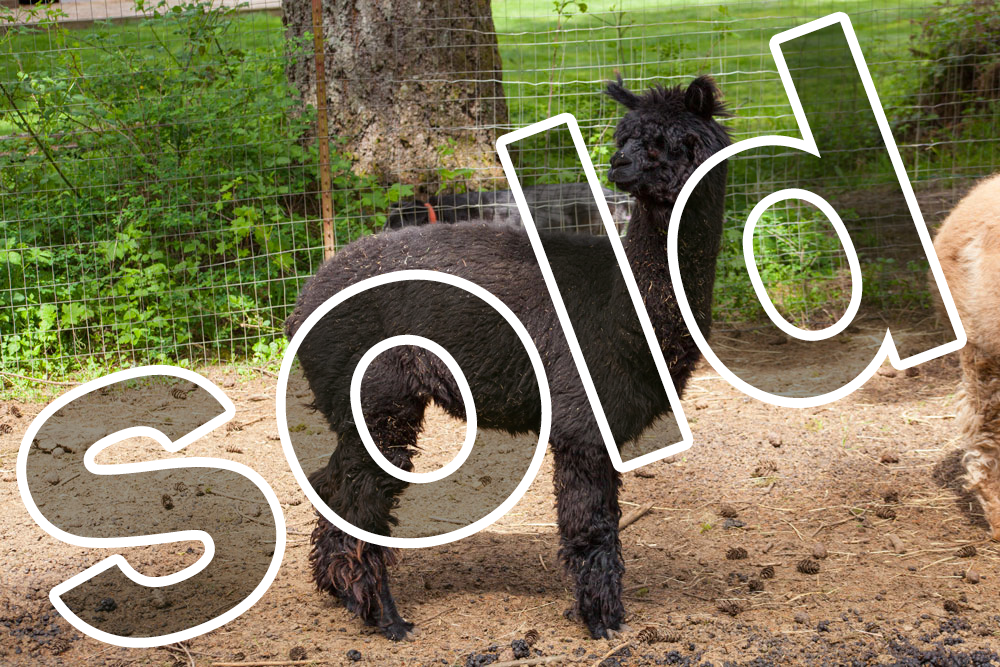
<style>
.page{position:relative;width:1000px;height:667px}
.page>*{position:absolute;margin:0}
.t1{font:473.2px "Arial-BoldMT"}
</style>
<div class="page">
<p class="t1" style="left:26px;top:21px;width:932px;height:617px;rotate:-20deg">sold</p>
</div>
